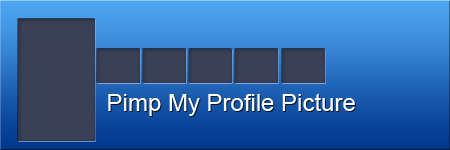
<style>
.page{position:relative;width:450px;height:150px}
.page>*{position:absolute;margin:0}
.t1{font:24px "ArialMT";color:#ffffff}
</style>
<div class="page">
<p class="t1" style="left:108px;top:93px;width:247px;height:23px">Pimp My Profile Picture</p>
</div>
